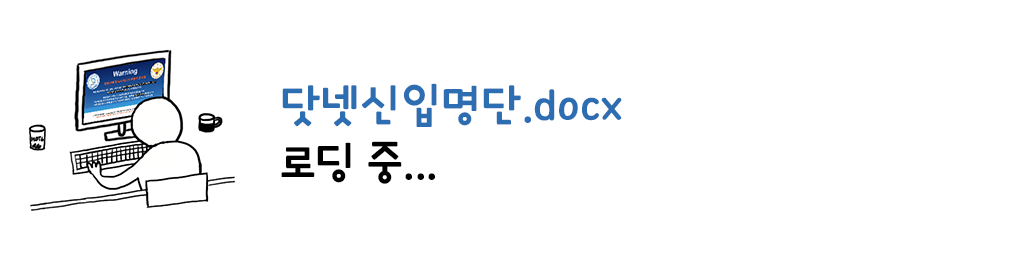
<style>
.page{position:relative;width:1024px;height:268px;background:#ffffff}
.page>*{position:absolute;margin:0}
.t1{font:46.9px "OTBlahblahR";color:#2c6db1}
.t2{font:46.9px "OTBlahblahR";color:#000000}
</style>
<div class="page">
<p class="t1" style="left:281px;top:83px;width:341px;height:101px">닷넷신입명단.docx<br><span class="t2">로딩 중...</span></p>
</div>
